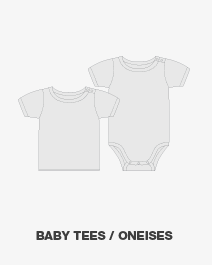
<style>
.page{position:relative;width:213px;height:265px;background:#f6f6f6}
.page>*{position:absolute;margin:0}
.t1{font:12px "HelveticaNeueLTStd-Hv";color:#3d3d3d}
</style>
<div class="page">
<p class="t1" style="left:36px;top:231px;width:137px;height:9px">BABY TEES / ONEISES</p>
</div>
